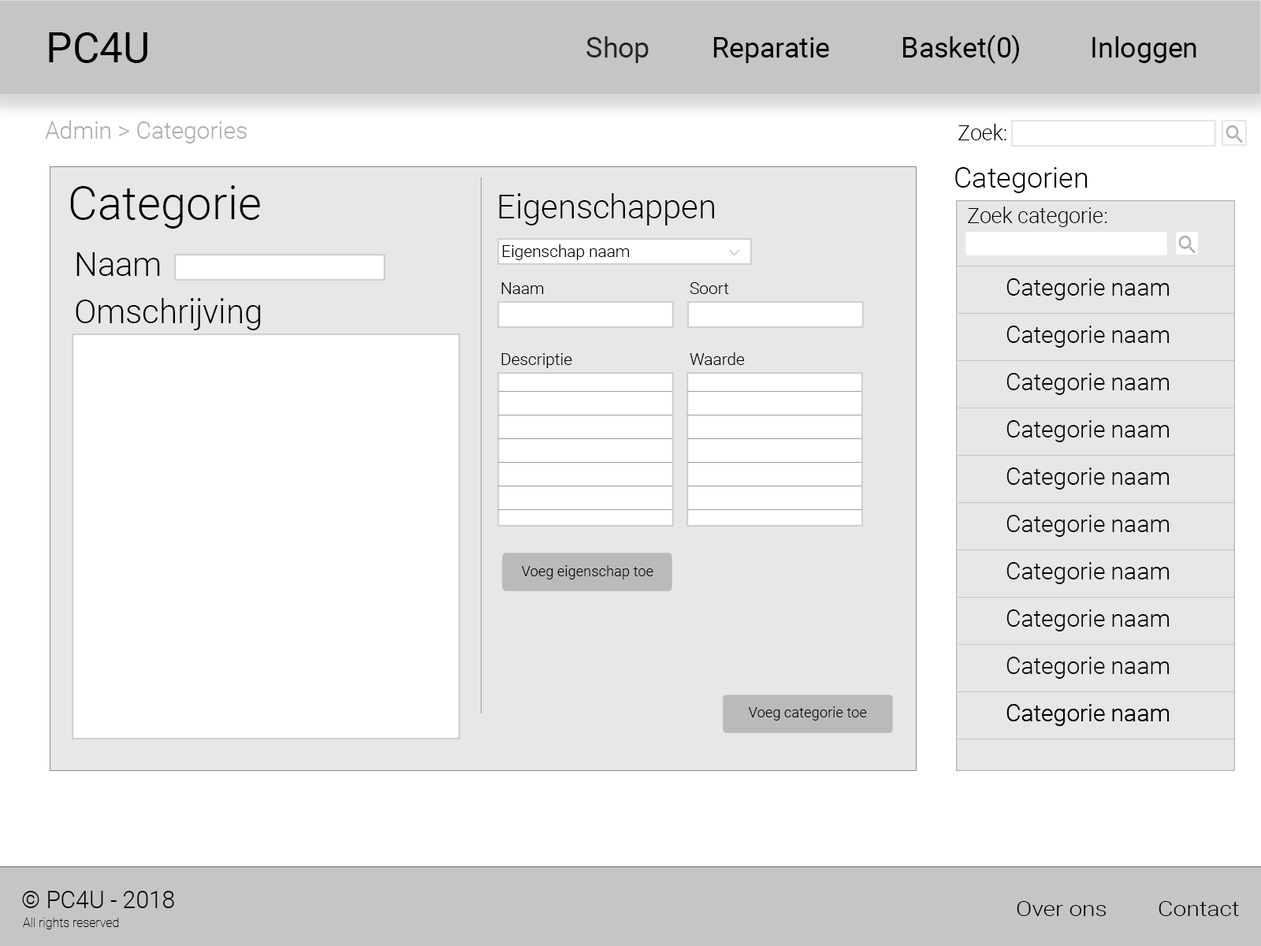
<style>
.page{position:relative;width:1261px;height:946px;background:#ffffff}
.page>*{position:absolute;margin:0}
.t1{font:42px "Roboto-Regular";color:#000000}
.t2{font:28px "Roboto-Regular";color:#000000}
.t3{font:28px "Roboto-Regular";color:#262626}
.t4{font:23.6px "Roboto-Light";color:#afafaf}
.t5{font:21px "Roboto-Light";color:#000000}
.t6{font:28.4px "Roboto-Light";color:#000000}
.t7{font:46px "Roboto-Light";color:#000000}
.t8{font:32.8px "Roboto-Light";color:#000000}
.t9{font:16.4px "Roboto-Light";color:#000000}
.t10{font:16.8px "Roboto-Light";color:#d0d0d0;scale:1.95 1}
.t11{font:23.6px "Roboto-Light";color:#000000}
.t12{font:14.5px "Roboto-Light";color:#000000}
.t13{font:20.4px "Roboto-Light";color:#000000;scale:1.16 1}
.t14{font:12.6px "Roboto-Thin";color:#000000}
</style>
<div class="page">
<p class="t1" style="left:49px;top:32px;width:98px;height:31px">PC4U</p>
<p class="t2" style="left:586px;top:35px;width:610px;height:29px"><span class="t3">Shop</span>  Reparatie   Basket(0)   Inloggen</p>
<p class="t4" style="left:45px;top:121px;width:202px;height:22px">Admin &gt; Categories</p>
<p class="t5" style="left:958px;top:124px;width:48px;height:16px">Zoek:</p>
<p class="t6" style="left:955px;top:167px;width:133px;height:26px">Categorien</p>
<p class="t7" style="left:70px;top:185px;width:190px;height:44px">Categorie</p>
<p class="t8" style="left:499px;top:193px;width:215px;height:32px">Eigenschappen</p>
<p class="t5" style="left:968px;top:206px;width:139px;height:21px">Zoek categorie:</p>
<p class="t9" style="left:503px;top:244px;width:126px;height:16px">Eigenschap naam</p>
<p class="t8" style="left:76px;top:252px;width:84px;height:24px">Naam</p>
<p class="t10" style="left:728px;top:250px;width:12px;height:5px">^</p>
<p class="t11" style="left:1006px;top:278px;width:163px;height:22px">Categorie naam</p>
<p class="t9" style="left:501px;top:282px;width:43px;height:12px">Naam</p>
<p class="t9" style="left:690px;top:282px;width:39px;height:12px">Soort</p>
<p class="t8" style="left:76px;top:298px;width:185px;height:32px">Omschrijving</p>
<p class="t11" style="left:1006px;top:325px;width:163px;height:23px">Categorie naam</p>
<p class="t9" style="left:501px;top:353px;width:71px;height:15px">Descriptie</p>
<p class="t9" style="left:690px;top:352px;width:55px;height:13px">Waarde</p>
<p class="t11" style="left:1006px;top:373px;width:163px;height:22px">Categorie naam</p>
<p class="t11" style="left:1006px;top:420px;width:163px;height:22px">Categorie naam</p>
<p class="t11" style="left:1006px;top:467px;width:163px;height:22px">Categorie naam</p>
<p class="t11" style="left:1006px;top:515px;width:163px;height:22px">Categorie naam</p>
<p class="t12" style="left:521px;top:565px;width:132px;height:14px">Voeg eigenschap toe</p>
<p class="t11" style="left:1006px;top:562px;width:163px;height:22px">Categorie naam</p>
<p class="t11" style="left:1006px;top:609px;width:163px;height:22px">Categorie naam</p>
<p class="t11" style="left:1006px;top:656px;width:163px;height:23px">Categorie naam</p>
<p class="t12" style="left:748px;top:706px;width:119px;height:14px">Voeg categorie toe</p>
<p class="t11" style="left:1006px;top:704px;width:163px;height:22px">Categorie naam</p>
<p class="t11" style="left:1006px;top:704px;width:163px;height:22px">Categorie naam</p>
<p class="t11" style="left:22px;top:891px;width:152px;height:17px">© PC4U - 2018</p>
<p class="t13" style="left:1017px;top:901px;width:222px;height:15px">Over ons  Contact</p>
<p class="t14" style="left:23px;top:917px;width:96px;height:12px">All rights reserved</p>
</div>
